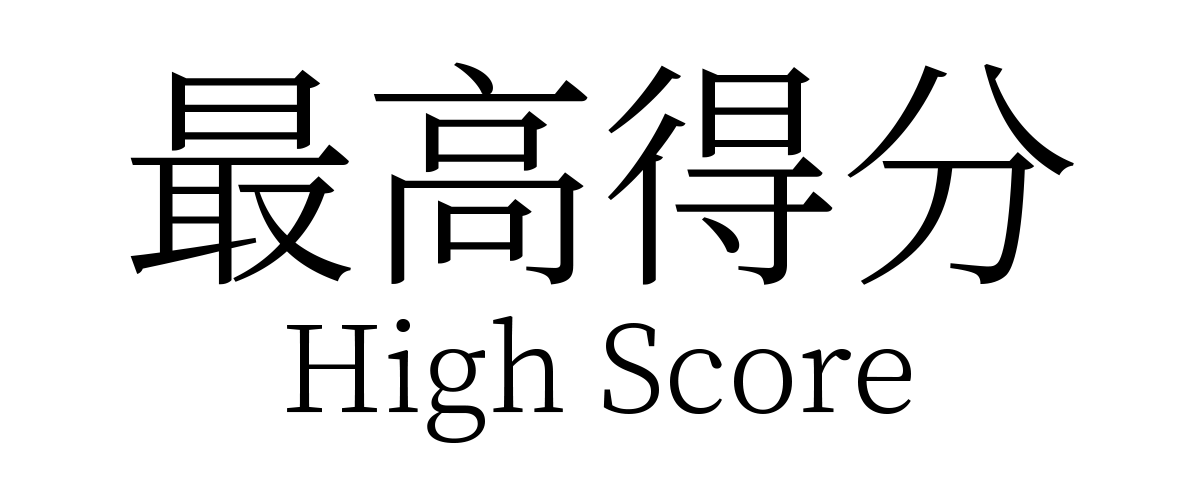
<style>
.page{position:relative;width:1200px;height:480px;background:#ffffff}
.page>*{position:absolute;margin:0}
.t1{font:240px "SourceHanSerifCN-Light";color:#000000}
.t2{font:120px "SourceHanSerifCN-Light";color:#000000}
</style>
<div class="page">
<p class="t1" style="left:130px;top:62px;width:944px;height:223px">最高得分</p>
<p class="t2" style="left:287px;top:315px;width:624px;height:129px">High Score</p>
</div>
